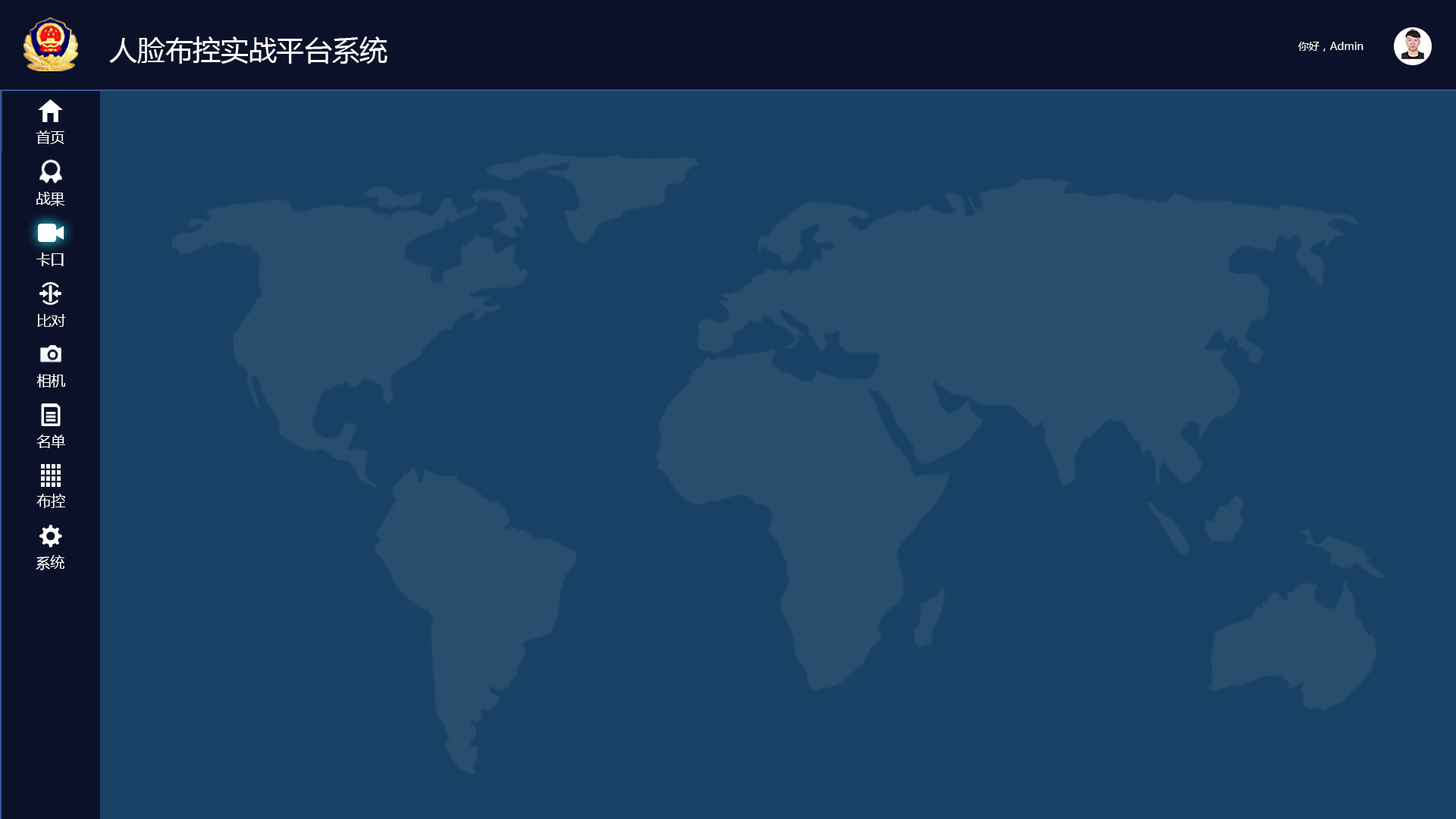
<style>
.page{position:relative;width:1456px;height:819px;background:#184165}
.page>*{position:absolute;margin:0}
.t1{font:27.8px "MicrosoftYaHei";color:#ffffff}
.t2{font:10.6px "MicrosoftYaHei";color:#ffffff}
.t3{font:14.2px "MicrosoftYaHei";color:#ffffff}
</style>
<div class="page">
<p class="t1" style="left:109px;top:36px;width:279px;height:28px">人脸布控实战平台系统</p>
<p class="t2" style="left:1298px;top:42px;width:65px;height:10px">你好，Admin</p>
<p class="t3" style="left:36px;top:130px;width:28px;height:14px">首页</p>
<p class="t3" style="left:36px;top:192px;width:29px;height:14px">战果</p>
<p class="t3" style="left:36px;top:253px;width:28px;height:13px">卡口</p>
<p class="t3" style="left:36px;top:253px;width:28px;height:13px">卡口</p>
<p class="t3" style="left:37px;top:314px;width:29px;height:13px">比对</p>
<p class="t3" style="left:36px;top:374px;width:30px;height:14px">相机</p>
<p class="t3" style="left:36px;top:435px;width:29px;height:13px">名单</p>
<p class="t3" style="left:36px;top:494px;width:29px;height:14px">布控</p>
<p class="t3" style="left:36px;top:555px;width:28px;height:15px">系统</p>
</div>
